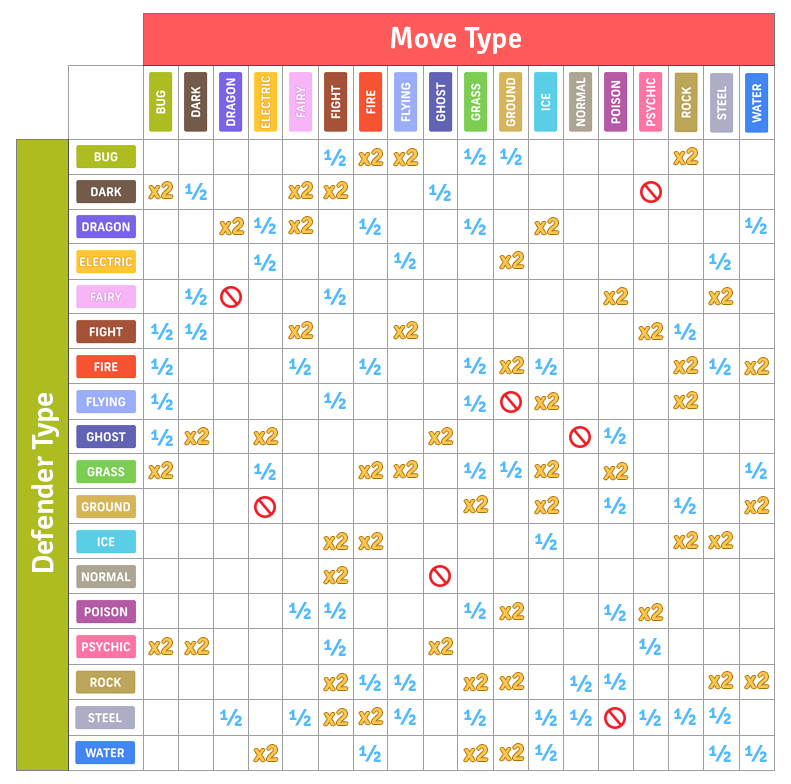
<style>
.page{position:relative;width:791px;height:784px;background:#ffffff}
.page>*{position:absolute;margin:0}
.t1{font:30px "Signika-Semibold";color:#ffffff}
.t2{font:24px "Signika-Semibold";color:#4ebaff}
.t3{font:24px "Signika-Semibold";color:#ffc750}
</style>
<div class="page">
<p class="t1" style="left:391px;top:26px;width:130px;height:28px">Move Type</p>
<p class="t2" style="left:323px;top:149px;width:23px;height:17px">½</p>
<p class="t3" style="left:359px;top:149px;width:24px;height:17px">x2</p>
<p class="t3" style="left:394px;top:149px;width:24px;height:17px">x2</p>
<p class="t2" style="left:463px;top:148px;width:23px;height:17px">½</p>
<p class="t2" style="left:499px;top:148px;width:23px;height:17px">½</p>
<p class="t3" style="left:674px;top:148px;width:24px;height:17px">x2</p>
<p class="t3" style="left:149px;top:182px;width:24px;height:17px">x2</p>
<p class="t2" style="left:184px;top:183px;width:23px;height:17px">½</p>
<p class="t3" style="left:289px;top:182px;width:24px;height:17px">x2</p>
<p class="t3" style="left:324px;top:182px;width:24px;height:17px">x2</p>
<p class="t2" style="left:428px;top:184px;width:23px;height:17px">½</p>
<p class="t3" style="left:220px;top:218px;width:24px;height:17px">x2</p>
<p class="t2" style="left:253px;top:217px;width:23px;height:17px">½</p>
<p class="t3" style="left:289px;top:217px;width:24px;height:17px">x2</p>
<p class="t2" style="left:358px;top:218px;width:23px;height:17px">½</p>
<p class="t2" style="left:463px;top:218px;width:23px;height:17px">½</p>
<p class="t3" style="left:535px;top:218px;width:24px;height:17px">x2</p>
<p class="t2" style="left:744px;top:217px;width:23px;height:17px">½</p>
<p class="t2" style="left:253px;top:254px;width:23px;height:17px">½</p>
<p class="t2" style="left:393px;top:252px;width:23px;height:17px">½</p>
<p class="t3" style="left:500px;top:252px;width:24px;height:17px">x2</p>
<p class="t2" style="left:708px;top:253px;width:23px;height:17px">½</p>
<p class="t2" style="left:184px;top:288px;width:23px;height:17px">½</p>
<p class="t2" style="left:323px;top:288px;width:23px;height:17px">½</p>
<p class="t3" style="left:604px;top:288px;width:24px;height:17px">x2</p>
<p class="t3" style="left:709px;top:288px;width:24px;height:17px">x2</p>
<p class="t2" style="left:150px;top:323px;width:23px;height:17px">½</p>
<p class="t2" style="left:184px;top:323px;width:23px;height:17px">½</p>
<p class="t3" style="left:289px;top:322px;width:24px;height:17px">x2</p>
<p class="t3" style="left:394px;top:322px;width:24px;height:17px">x2</p>
<p class="t3" style="left:639px;top:323px;width:24px;height:17px">x2</p>
<p class="t2" style="left:673px;top:323px;width:23px;height:17px">½</p>
<p class="t2" style="left:150px;top:358px;width:23px;height:17px">½</p>
<p class="t2" style="left:288px;top:358px;width:23px;height:17px">½</p>
<p class="t2" style="left:358px;top:358px;width:23px;height:17px">½</p>
<p class="t2" style="left:463px;top:357px;width:23px;height:17px">½</p>
<p class="t3" style="left:500px;top:357px;width:24px;height:17px">x2</p>
<p class="t2" style="left:534px;top:358px;width:23px;height:17px">½</p>
<p class="t3" style="left:674px;top:357px;width:24px;height:17px">x2</p>
<p class="t2" style="left:708px;top:358px;width:23px;height:17px">½</p>
<p class="t3" style="left:745px;top:358px;width:24px;height:17px">x2</p>
<p class="t1" style="left:31px;top:393px;width:28px;height:179px;rotate:-90deg">Defender Type</p>
<p class="t2" style="left:150px;top:393px;width:23px;height:17px">½</p>
<p class="t2" style="left:323px;top:392px;width:23px;height:17px">½</p>
<p class="t2" style="left:463px;top:395px;width:23px;height:17px">½</p>
<p class="t3" style="left:535px;top:393px;width:24px;height:17px">x2</p>
<p class="t3" style="left:674px;top:392px;width:24px;height:17px">x2</p>
<p class="t2" style="left:150px;top:429px;width:23px;height:17px">½</p>
<p class="t3" style="left:185px;top:428px;width:24px;height:17px">x2</p>
<p class="t3" style="left:254px;top:428px;width:24px;height:17px">x2</p>
<p class="t3" style="left:429px;top:428px;width:24px;height:17px">x2</p>
<p class="t2" style="left:603px;top:427px;width:23px;height:17px">½</p>
<p class="t3" style="left:149px;top:462px;width:24px;height:17px">x2</p>
<p class="t3" style="left:359px;top:462px;width:24px;height:17px">x2</p>
<p class="t3" style="left:394px;top:461px;width:24px;height:17px">x2</p>
<p class="t2" style="left:463px;top:462px;width:23px;height:17px">½</p>
<p class="t2" style="left:499px;top:461px;width:23px;height:17px">½</p>
<p class="t3" style="left:535px;top:461px;width:24px;height:17px">x2</p>
<p class="t2" style="left:744px;top:462px;width:23px;height:17px">½</p>
<p class="t2" style="left:253px;top:463px;width:23px;height:17px">½</p>
<p class="t3" style="left:604px;top:463px;width:24px;height:17px">x2</p>
<p class="t3" style="left:464px;top:496px;width:24px;height:17px">x2</p>
<p class="t3" style="left:535px;top:497px;width:24px;height:17px">x2</p>
<p class="t2" style="left:603px;top:497px;width:23px;height:17px">½</p>
<p class="t2" style="left:673px;top:497px;width:23px;height:17px">½</p>
<p class="t3" style="left:745px;top:497px;width:24px;height:17px">x2</p>
<p class="t3" style="left:324px;top:533px;width:24px;height:17px">x2</p>
<p class="t3" style="left:359px;top:533px;width:24px;height:17px">x2</p>
<p class="t2" style="left:534px;top:533px;width:23px;height:17px">½</p>
<p class="t3" style="left:674px;top:532px;width:24px;height:17px">x2</p>
<p class="t3" style="left:709px;top:532px;width:24px;height:17px">x2</p>
<p class="t3" style="left:324px;top:567px;width:24px;height:17px">x2</p>
<p class="t2" style="left:288px;top:602px;width:23px;height:17px">½</p>
<p class="t2" style="left:323px;top:602px;width:23px;height:17px">½</p>
<p class="t2" style="left:463px;top:602px;width:23px;height:17px">½</p>
<p class="t3" style="left:500px;top:603px;width:24px;height:17px">x2</p>
<p class="t2" style="left:603px;top:604px;width:23px;height:17px">½</p>
<p class="t3" style="left:639px;top:604px;width:24px;height:17px">x2</p>
<p class="t3" style="left:149px;top:638px;width:24px;height:17px">x2</p>
<p class="t3" style="left:185px;top:638px;width:24px;height:17px">x2</p>
<p class="t2" style="left:323px;top:639px;width:23px;height:17px">½</p>
<p class="t3" style="left:429px;top:638px;width:24px;height:17px">x2</p>
<p class="t2" style="left:638px;top:638px;width:23px;height:17px">½</p>
<p class="t3" style="left:324px;top:674px;width:24px;height:17px">x2</p>
<p class="t2" style="left:358px;top:674px;width:23px;height:17px">½</p>
<p class="t2" style="left:393px;top:674px;width:23px;height:17px">½</p>
<p class="t3" style="left:464px;top:674px;width:24px;height:17px">x2</p>
<p class="t3" style="left:500px;top:673px;width:24px;height:17px">x2</p>
<p class="t2" style="left:569px;top:675px;width:23px;height:17px">½</p>
<p class="t2" style="left:603px;top:673px;width:23px;height:17px">½</p>
<p class="t3" style="left:709px;top:672px;width:24px;height:17px">x2</p>
<p class="t3" style="left:745px;top:672px;width:24px;height:17px">x2</p>
<p class="t2" style="left:219px;top:709px;width:23px;height:17px">½</p>
<p class="t2" style="left:288px;top:709px;width:23px;height:17px">½</p>
<p class="t3" style="left:324px;top:709px;width:24px;height:17px">x2</p>
<p class="t3" style="left:359px;top:708px;width:24px;height:17px">x2</p>
<p class="t2" style="left:393px;top:708px;width:23px;height:17px">½</p>
<p class="t2" style="left:463px;top:709px;width:23px;height:17px">½</p>
<p class="t2" style="left:534px;top:709px;width:23px;height:17px">½</p>
<p class="t2" style="left:569px;top:709px;width:23px;height:17px">½</p>
<p class="t2" style="left:638px;top:709px;width:23px;height:17px">½</p>
<p class="t2" style="left:673px;top:708px;width:23px;height:17px">½</p>
<p class="t2" style="left:708px;top:707px;width:23px;height:17px">½</p>
<p class="t3" style="left:254px;top:745px;width:24px;height:17px">x2</p>
<p class="t2" style="left:358px;top:745px;width:23px;height:17px">½</p>
<p class="t3" style="left:464px;top:745px;width:24px;height:17px">x2</p>
<p class="t3" style="left:500px;top:744px;width:24px;height:17px">x2</p>
<p class="t2" style="left:534px;top:744px;width:23px;height:17px">½</p>
<p class="t2" style="left:708px;top:745px;width:23px;height:17px">½</p>
<p class="t2" style="left:744px;top:745px;width:23px;height:17px">½</p>
</div>
